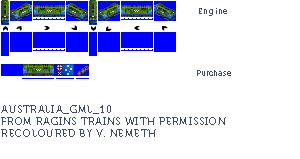
<style>
.page{position:relative;width:300px;height:159px;background:#ffffff}
.page>*{position:absolute;margin:0}
.t1{font:8px "Museo700-Regular";letter-spacing:0.075em;color:#444c5c}
.t2{font:8px "Museo700-Regular";color:#444c5c}
.t3{font:10px "Museo700-Regular";letter-spacing:0.075em;color:#444c5c;text-transform:uppercase}
</style>
<div class="page">
<p class="t1" style="left:199px;top:8px;width:28px;height:8px">Engine</p>
<p class="t2" style="left:197px;top:70px;width:34px;height:6px">Purchase</p>
<p class="t3" style="left:1px;top:105px;width:225px;height:32px">Australia_GML_10<br>from ragins trains with permission<br>RECOLOURED BY v. nemeth</p>
</div>
